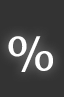
<style>
.page{position:relative;width:64px;height:97px;background:#333333}
.page>*{position:absolute;margin:0}
.t1{font:48px "Merriweather-Regular";color:#ffffff}
</style>
<div class="page">
<p class="t1" style="left:8px;top:36px;width:45px;height:36px">%</p>
</div>
